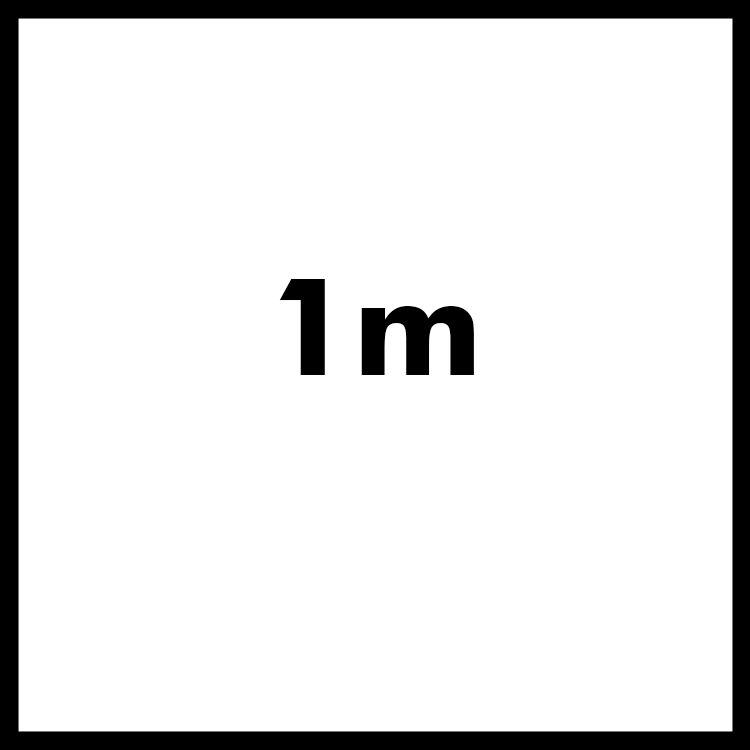
<style>
.page{position:relative;width:750px;height:750px;background:#ffffff}
.page>*{position:absolute;margin:0}
.t1{font:136px "Futura-Bold";color:#000000}
</style>
<div class="page">
<p class="t1" style="left:279px;top:279px;width:195px;height:96px">1m</p>
</div>
